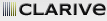
<style>
.page{position:relative;width:107px;height:21px}
.page>*{position:absolute;margin:0}
.t1{font:17.1px "Syncopate-Bold";color:#0f0f10;scale:0.89 1}
</style>
<div class="page">
<p class="t1" style="left:19px;top:3px;width:87px;height:13px">CLARIVe</p>
</div>
